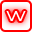
<style>
.page{position:relative;width:32px;height:32px;background:#ff0000}
.page>*{position:absolute;margin:0}
.t1{font:14px "Federation";color:#ffffff;font-weight:bold}
</style>
<div class="page">
<p class="t1" style="left:6px;top:11px;width:20px;height:10px">W</p>
</div>
